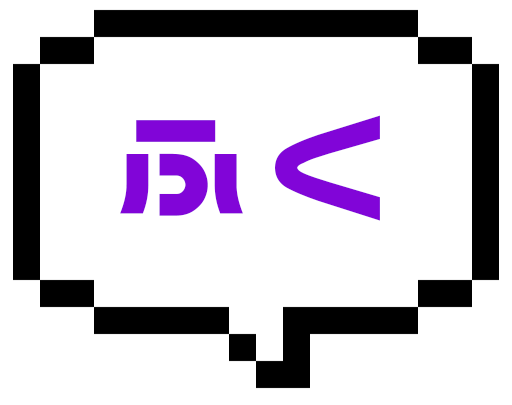
<style>
.page{position:relative;width:512px;height:405px;background:#ffffff}
.page>*{position:absolute;margin:0}
.t1{font:165.8px "Nicoca";letter-spacing:0.1em;color:#8105d8}
</style>
<div class="page">
<p class="t1" style="left:120px;top:115px;width:260px;height:106px">ふく</p>
</div>
